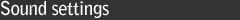
<style>
.page{position:relative;width:240px;height:20px;background:#333333}
.page>*{position:absolute;margin:0}
.t1{font:19px "BellGothicStd-Bold";letter-spacing:-0.025em;color:#ffffff}
</style>
<div class="page">
<p class="t1" style="left:0px;top:0px;width:109px;height:18px">Sound settings</p>
</div>
